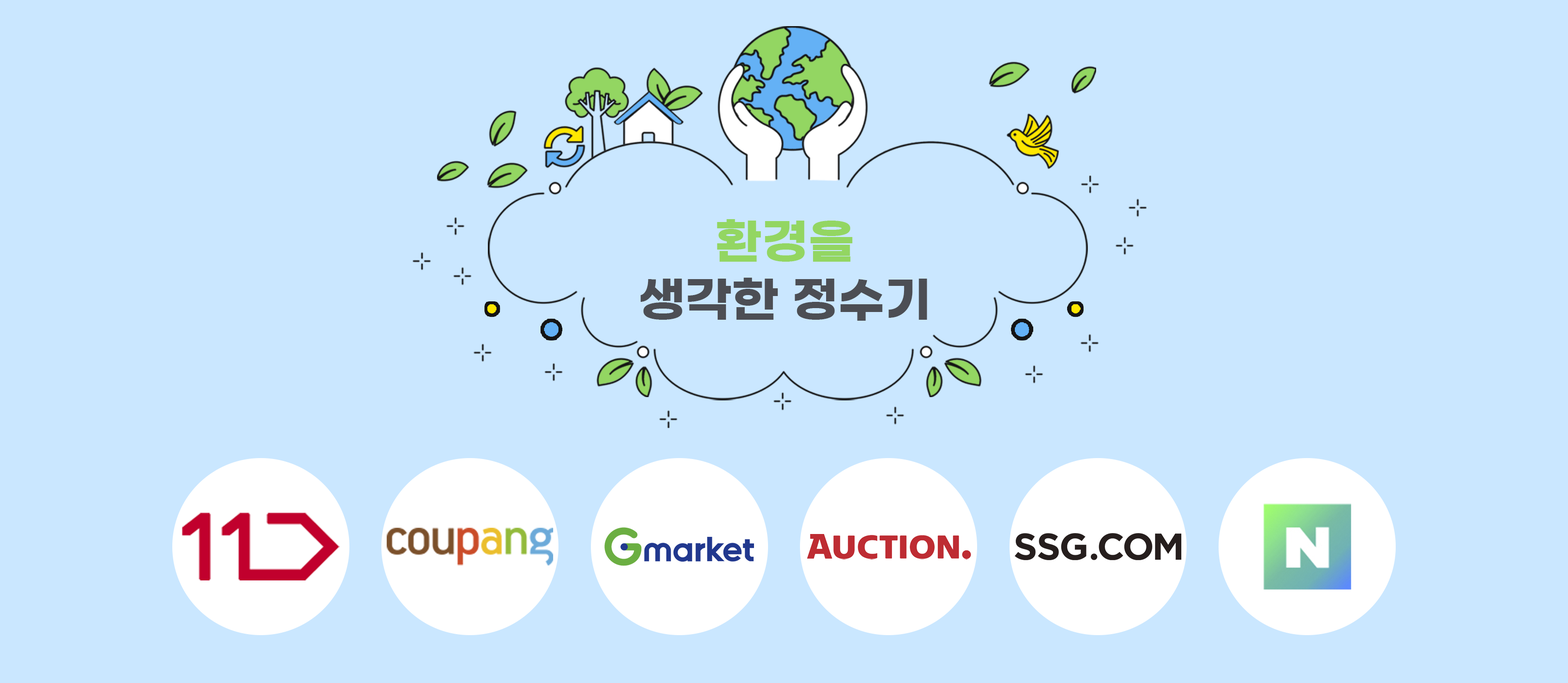
<style>
.page{position:relative;width:1568px;height:683px;background:#cae7ff}
.page>*{position:absolute;margin:0}
.t1{font:48.4px "GmarketSansTTFBold";color:#4c4e54}
.t2{font:48.4px "GmarketSansTTFBold";color:#93d662}
</style>
<div class="page">
<p class="t1" style="left:640px;top:219px;width:287px;height:102px;text-align:center"><span class="t2">환경을<br></span>생각한 정수기</p>
</div>
